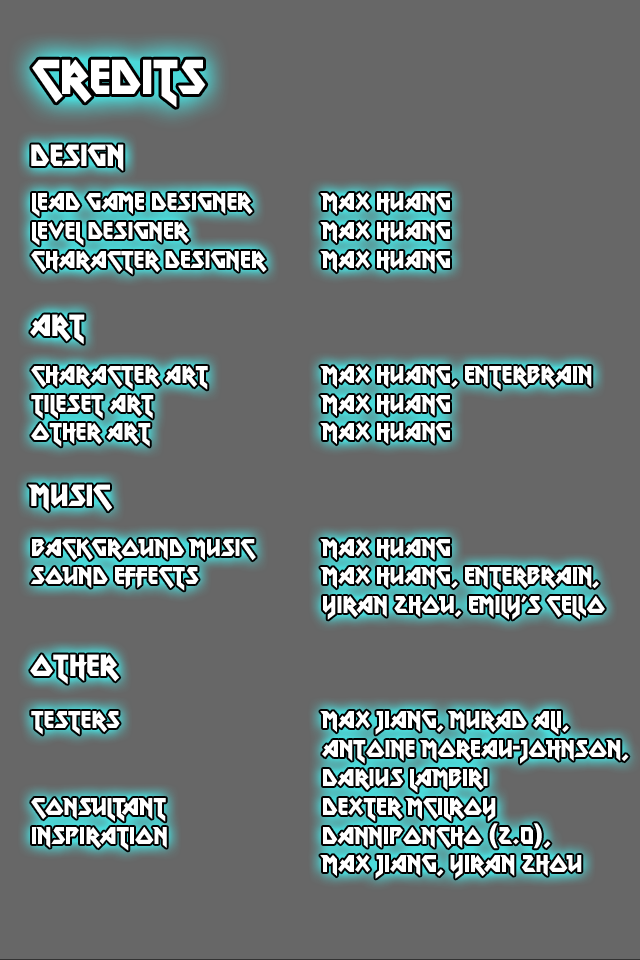
<style>
.page{position:relative;width:640px;height:960px;background:#676767}
.page>*{position:absolute;margin:0}
.t1{font:48px "MetalLord-Regular";color:#ffffff}
.t2{font:30px "MetalLord-Regular";color:#ffffff}
.t3{font:24px "MetalLord-Regular";color:#ffffff}
</style>
<div class="page">
<p class="t1" style="left:32px;top:59px;width:174px;height:48px">Credits</p>
<p class="t2" style="left:31px;top:144px;width:93px;height:27px">Design</p>
<p class="t3" style="left:31px;top:193px;width:236px;height:658px">Lead Game Designer<br>Level Designer<br>Character Designer<br><br><br><br>Character Art<br>TIleset art<br>Other Art<br><br><br><br>Background Music<br>Sound Effects<br><br><br><br><br>Testers<br><br><br>Consultant<br>Inspiration</p>
<p class="t3" style="left:320px;top:192px;width:309px;height:687px">Max Huang<br>Max Huang<br>Max Huang<br><br><br><br>Max Huang, EnterBrain<br>Max Huang<br>Max Huang<br><br><br><br>Max Huang<br>Max HUang, Enterbrain,<br>Yiran Zhou, Emily’s Cello<br><br><br><br>Max Jiang, Murad Ali,<br>ANTOINE MOREAU-JOHNSON,<br>Darius Lambiri<br>Dexter McIlroy<br>Danniponcho (2.0),<br>Max Jiang, Yiran Zhou</p>
<p class="t2" style="left:30px;top:314px;width:55px;height:30px">Art</p>
<p class="t2" style="left:28px;top:484px;width:85px;height:28px">Music</p>
<p class="t2" style="left:30px;top:654px;width:90px;height:30px">Other</p>
</div>
